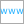
<style>
.page{position:relative;width:24px;height:24px;background:#ffffff}
.page>*{position:absolute;margin:0}
.t1{font:9.5px "DejaVuSans";color:#32b6ff}
</style>
<div class="page">
<p class="t1" style="left:0px;top:8px;width:24px;height:6px">www</p>
</div>
